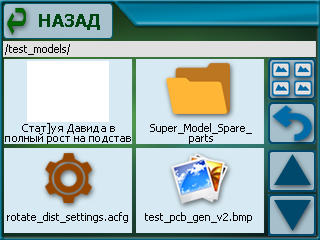
<style>
.page{position:relative;width:320px;height:240px;background:#d7e9f2}
.page>*{position:absolute;margin:0}
.t1{font:18px "Tahoma-Bold";color:#004612}
.t2{font:11px "Tahoma";color:#000000}
.t3{font:11px/10px "Tahoma";color:#000000}
</style>
<div class="page">
<p class="t1" style="left:39px;top:14px;width:61px;height:16px">НАЗАД</p>
<p class="t2" style="left:5px;top:44px;width:65px;height:11px">/test_models/</p>
<p class="t3" style="left:5px;top:123px;width:126px;height:21px;text-align:center">Стат]уя Давида в<br>полный рост на подстав</p>
<p class="t3" style="left:150px;top:123px;width:102px;height:21px;text-align:center">Super_Model_Spare_<br>parts</p>
<p class="t2" style="left:7px;top:212px;width:121px;height:11px">rotate_dist_settings.acfg</p>
<p class="t2" style="left:145px;top:212px;width:107px;height:11px">test_pcb_gen_v2.bmp</p>
</div>
